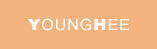
<style>
.page{position:relative;width:157px;height:49px;background:#f3b47f}
.page>*{position:absolute;margin:0}
.t1{font:15.2px "ArialMT";letter-spacing:0.06em;color:#ffffff;scale:1.05 1}
.t2{font:15.2px "Arial-Black";letter-spacing:0.06em;color:#ffffff;scale:1.05 1}
</style>
<div class="page">
<p class="t1" style="left:28px;top:18px;width:101px;height:13px"><span class="t2">Y</span>OUNG<span class="t2">H</span>EE</p>
</div>
